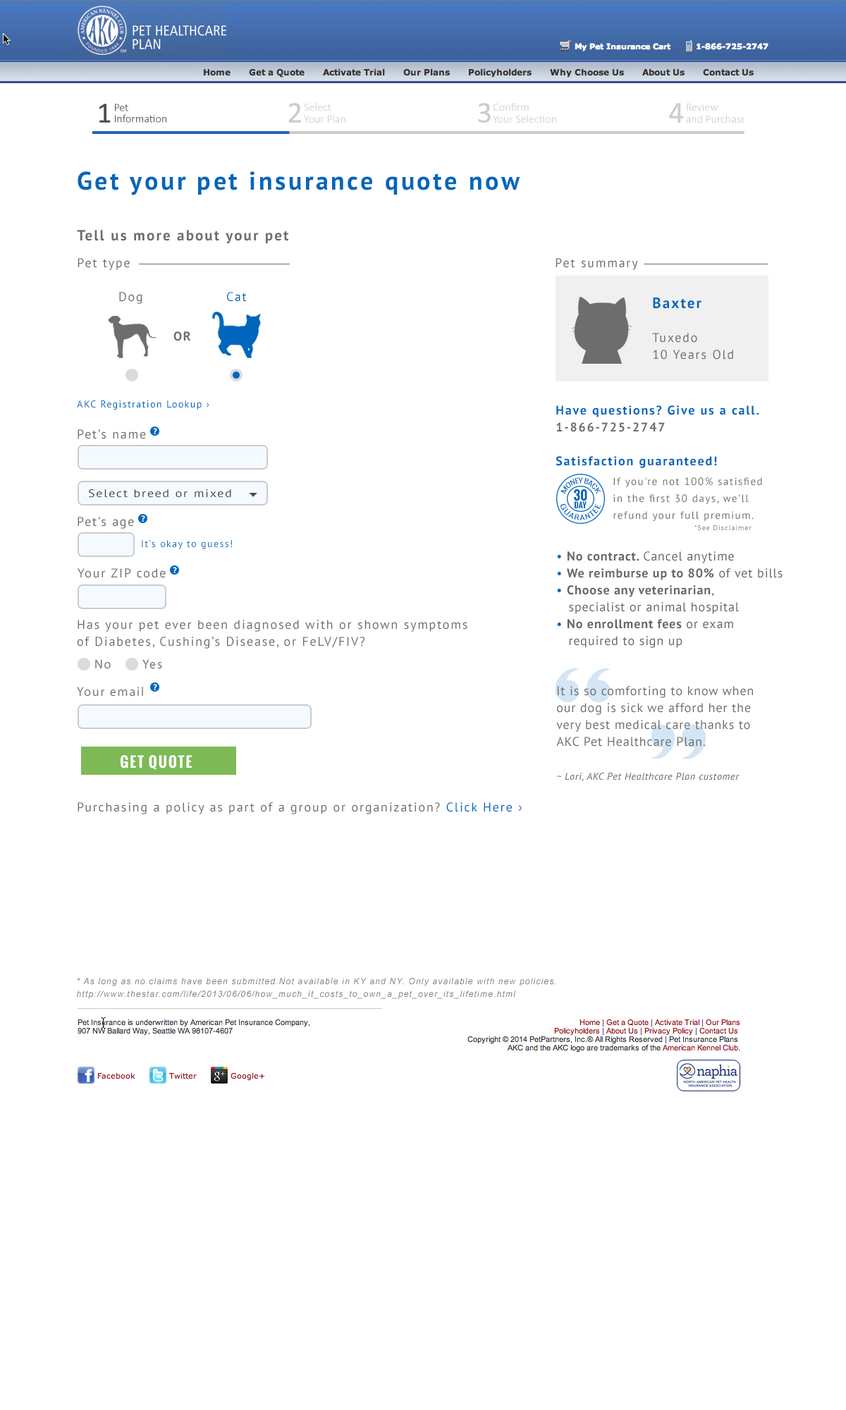
<style>
.page{position:relative;width:846px;height:1410px;background:#ffffff}
.page>*{position:absolute;margin:0}
.t1{font:25.4px "PTSans-Bold";letter-spacing:0.1em;color:#0066bc}
.t2{font:14.8px "PTSans-Bold";letter-spacing:0.1em;color:#6d6d6d}
.t3{font:12.7px "PTSans-Regular";letter-spacing:0.1em;color:#6d6d6d}
.t4{font:12.7px "PTSans-Regular";letter-spacing:0.1em;color:#0066bc}
.t5{font:12.7px/16.9px "PTSans-Regular";letter-spacing:0.1em;color:#6d6d6d}
.t6{font:14.8px/29.6px "PTSans-Bold";letter-spacing:0.1em;color:#0066bc}
.t7{font:12.7px/33.8px "PTSans-Regular";letter-spacing:0.1em;color:#6d6d6d}
.t8{font:12.7px "PTSans-Bold";letter-spacing:0.1em;color:#6d6d6d}
.t9{font:9.9px "PTSans-Regular";letter-spacing:0.1em;color:#0066bc}
.t10{font:12.7px/16.9px "PTSans-Bold";letter-spacing:0.1em;color:#0066bc}
.t11{font:12.7px/16.9px "PTSans-Bold";letter-spacing:0.1em;color:#6d6d6d}
.t12{font:8.5px "PTSans-Bold";letter-spacing:0.05em;color:#ffffff}
.t13{font:12.7px "PTSans-Bold";letter-spacing:0.1em;color:#0066bc}
.t14{font:6.3px/16.9px "Oswald-Light";color:#0066bc;scale:0.97 1}
.t15{font:10.6px/16.9px "PTSans-Regular";letter-spacing:0.1em;color:#6d6d6d}
.t16{font:11px "PTSans-Regular";letter-spacing:0.1em;color:#464646;scale:1.16 1}
.t17{font:12.7px "Oswald-Bold";letter-spacing:0.01em;color:#0066bc}
.t18{font:6.3px/16.9px "Oswald-Light";letter-spacing:0.05em;color:#0066bc}
.t19{font:7.8px "Oswald-Bold";letter-spacing:0.01em;color:#0066bc}
.t20{font:7px "PTSans-Regular";letter-spacing:0.1em}
.t21{font:9.9px "PTSans-Regular";letter-spacing:0.1em;color:#2173c1}
.t22{font:12.7px/16.9px "PTSans-Regular";letter-spacing:0.05em;color:#666666}
.t23{font:12.7px/16.9px "PTSans-Regular";letter-spacing:0.05em;color:#0066bc}
.t24{font:12.7px/16.9px "PTSans-Bold";letter-spacing:0.05em;color:#666666}
.t25{font:12.7px "MyriadPro-Regular";letter-spacing:0.1em;color:#6d6d6d}
.t26{font:12.7px/16.9px "PTSans-Regular";letter-spacing:0.05em;color:#6d6d6d}
.t27{font:9.9px/16.9px "PTSans-Italic";letter-spacing:0.05em;color:#6d6d6d}
.t28{font:14.1px "Oswald-Bold";letter-spacing:0.1em;color:#ffffff}
.t29{font:8.5px/12.7px "Arial-ItalicMT";letter-spacing:0.1em;color:#7c7c7c}
</style>
<div class="page">
<p class="t1" style="left:78px;top:171px;width:442px;height:24px">Get your pet insurance quote now</p>
<p class="t2" style="left:77px;top:230px;width:212px;height:14px">Tell us more about your pet</p>
<p class="t3" style="left:78px;top:258px;width:52px;height:12px">Pet type</p>
<p class="t3" style="left:555px;top:258px;width:83px;height:12px">Pet summary</p>
<p class="t3" style="left:119px;top:292px;width:23px;height:12px">Dog</p>
<p class="t4" style="left:227px;top:292px;width:20px;height:10px">Cat</p>
<p class="t5" style="left:652px;top:297px;width:81px;height:62px"><span class="t6">Baxter<br></span><span class="t7">Tuxedo<br></span>10 Years Old</p>
<p class="t8" style="left:173px;top:331px;width:18px;height:10px">OR</p>
<p class="t9" style="left:77px;top:400px;width:132px;height:10px">AKC Registration Lookup ›</p>
<p class="t10" style="left:556px;top:405px;width:203px;height:27px">Have questions? Give us a call.<br><span class="t11">1-866-725-2747</span></p>
<p class="t3" style="left:78px;top:429px;width:68px;height:10px">Pet’s name</p>
<p class="t12" style="left:153px;top:428px;width:4px;height:6px">?</p>
<p class="t13" style="left:555px;top:456px;width:162px;height:12px">Satisfaction guaranteed!</p>
<p class="t14" style="left:560px;top:477px;width:41px;height:17px">MONEY BACK</p>
<p class="t15" style="left:613px;top:477px;width:149px;height:44px">If you're not 100% satisfied <br>in the first 30 days, we'll <br>refund your full premium.</p>
<p class="t16" style="left:89px;top:489px;width:142px;height:9px">Select breed or mixed</p>
<p class="t17" style="left:574px;top:488px;width:13px;height:13px">30</p>
<p class="t18" style="left:560px;top:503px;width:41px;height:17px">GUARANTEE</p>
<p class="t19" style="left:574px;top:501px;width:12px;height:7px">DAY</p>
<p class="t3" style="left:78px;top:517px;width:56px;height:12px">Pet’s age</p>
<p class="t12" style="left:141px;top:515px;width:4px;height:7px">?</p>
<p class="t20" style="left:694px;top:525px;width:57px;height:5px">*See Disclaimer</p>
<p class="t21" style="left:142px;top:540px;width:91px;height:9px">It’s okay to guess!</p>
<p class="t22" style="left:557px;top:551px;width:225px;height:97px"><span class="t23">• </span><span class="t24">No contract. </span>Cancel anytime<br><span class="t23">• </span><span class="t24">We reimburse up to 80%</span> of vet bills<br><span class="t23">• </span><span class="t24">Choose any veterinarian</span>, <br>   specialist or animal hospital <br><span class="t23">• </span><span class="t24">No enrollment fees</span> or exam <br>   required to sign up</p>
<p class="t3" style="left:78px;top:568px;width:88px;height:10px">Your ZIP code</p>
<p class="t12" style="left:173px;top:567px;width:4px;height:6px">?</p>
<p class="t5" style="left:77px;top:620px;width:390px;height:28px">Has your pet ever been diagnosed with or shown symptoms <br>of Diabetes, Cushing’s Disease, or FeLV/FIV?</p>
<p class="t25" style="left:95px;top:659px;width:16px;height:10px">No</p>
<p class="t25" style="left:142px;top:659px;width:20px;height:10px">Yes</p>
<p class="t25" style="left:77px;top:687px;width:66px;height:9px">Your email</p>
<p class="t12" style="left:153px;top:684px;width:4px;height:6px">?</p>
<p class="t26" style="left:556px;top:686px;width:197px;height:96px">It is so comforting to know when <br>our dog is sick we afford her the <br>very best medical care thanks to <br>AKC Pet Healthcare Plan.<br><br><span class="t27">~ Lori, AKC Pet Healthcare Plan customer</span></p>
<p class="t28" style="left:121px;top:755px;width:71px;height:15px">GET QUOTE</p>
<p class="t3" style="left:78px;top:802px;width:444px;height:12px">Purchasing a policy as part of a group or organization? <span class="t4">Click Here ›</span></p>
<p class="t29" style="left:77px;top:978px;width:479px;height:21px">* As long as no claims have been submitted.Not available in KY and NY. Only available with new policies.<br>http://www.thestar.com/life/2013/06/06/how_much_it_costs_to_own_a_pet_over_its_lifetime.html</p>
</div>
